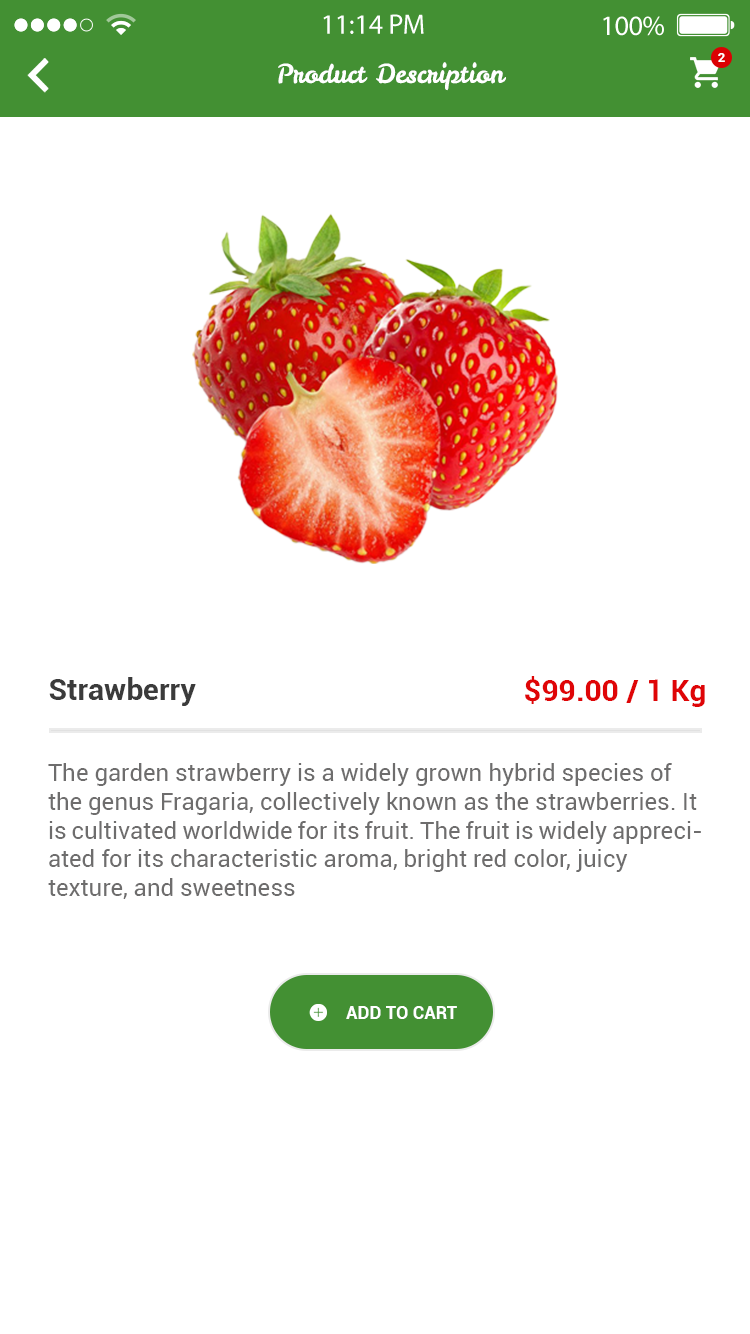
<style>
.page{position:relative;width:750px;height:1334px;background:#ffffff}
.page>*{position:absolute;margin:0}
.t1{font:13.1px "Roboto-Bold";color:#ffffff}
.t2{font:26px "LeckerliOne-Regular";color:#ffffff}
.t3{font:30px "Roboto-Bold";color:#3b3b3b}
.t4{font:30px "Roboto-Bold";color:#df0507}
.t5{font:24px "Roboto-Regular";color:#6e6d6d}
.t6{font:18px "Roboto-Bold";color:#ffffff}
</style>
<div class="page">
<p class="t1" style="left:718px;top:53px;width:7px;height:9px">2</p>
<p class="t2" style="left:278px;top:62px;width:228px;height:29px">Product Description</p>
<p class="t3" style="left:49px;top:677px;width:147px;height:29px">Strawberry</p>
<p class="t4" style="left:525px;top:676px;width:180px;height:31px">$99.00 / 1 Kg</p>
<p class="t5" style="left:48px;top:763px;width:653px;height:136px">The garden strawberry is a widely grown hybrid species of the genus Fragaria, collectively known as the strawberries. It is cultivated worldwide for its fruit. The fruit is widely appreciated for its characteristic aroma, bright red color, juicy texture, and sweetness</p>
<p class="t6" style="left:346px;top:1006px;width:111px;height:13px">ADD TO CART</p>
</div>
